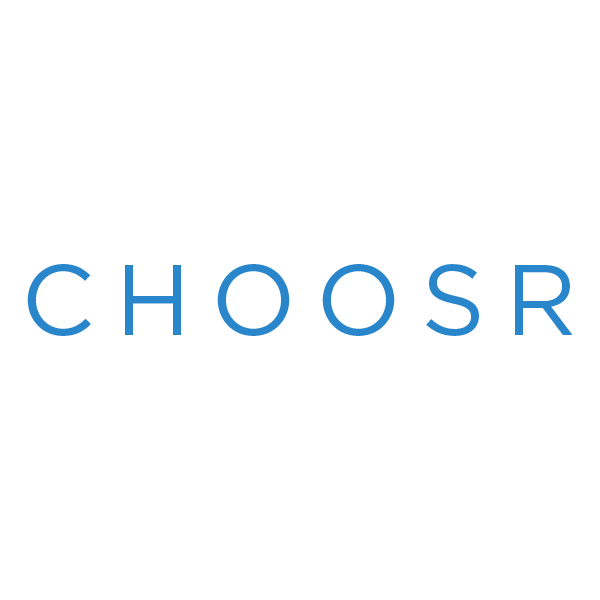
<style>
.page{position:relative;width:600px;height:600px;background:#ffffff}
.page>*{position:absolute;margin:0}
.t1{font:100px "GothamPro";letter-spacing:0.2em;color:#2a86cb}
</style>
<div class="page">
<p class="t1" style="left:27px;top:264px;width:546px;height:72px">CHOOSR</p>
</div>
